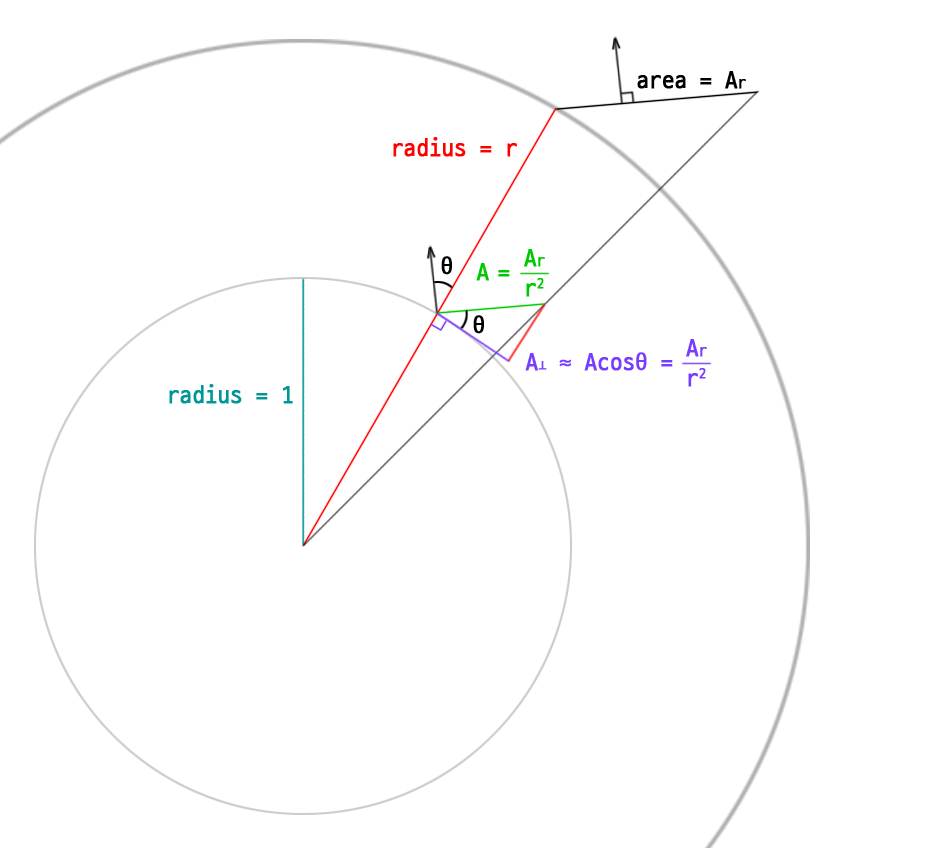
<style>
.page{position:relative;width:948px;height:848px;background:#ffffff}
.page>*{position:absolute;margin:0}
.t1{font:24px "D2Coding";color:#000000;font-weight:bold}
.t2{font:16px "D2Coding";color:#000000;font-weight:bold}
.t3{font:24px "D2Coding";color:#ff0000;font-weight:bold}
.t4{font:24px/30px "D2Coding";color:#00c800;font-weight:bold}
.t5{font:16px/30px "D2Coding";color:#00c800;font-weight:bold}
.t6{font:24px "D2Coding";color:#00c800;font-weight:bold}
.t7{font:24px/30px "D2Coding";color:#783cff;font-weight:bold}
.t8{font:16px/30px "D2Coding";color:#783cff;font-weight:bold}
.t9{font:24px "D2Coding";color:#783cff;font-weight:bold}
.t10{font:16px "D2Coding";color:#783cff;font-weight:bold}
.t11{font:24px "D2Coding";color:#009696;font-weight:bold}
</style>
<div class="page">
<p class="t1" style="left:637px;top:71px;width:109px;height:18px">area = A<span class="t2">r</span></p>
<p class="t3" style="left:393px;top:137px;width:124px;height:20px">radius = r</p>
<p class="t1" style="left:441px;top:256px;width:11px;height:19px">θ</p>
<p class="t4" style="left:524px;top:249px;width:21px;height:48px">A<span class="t5">r<br></span>r2</p>
<p class="t6" style="left:476px;top:263px;width:34px;height:18px">A =</p>
<p class="t1" style="left:473px;top:315px;width:11px;height:19px">θ</p>
<p class="t7" style="left:686px;top:339px;width:21px;height:48px">A<span class="t8">r<br></span>r2</p>
<p class="t9" style="left:525px;top:352px;width:148px;height:19px">A<span class="t10">⊥</span> ≈ Acosθ =</p>
<p class="t11" style="left:169px;top:384px;width:124px;height:20px">radius = 1</p>
</div>
